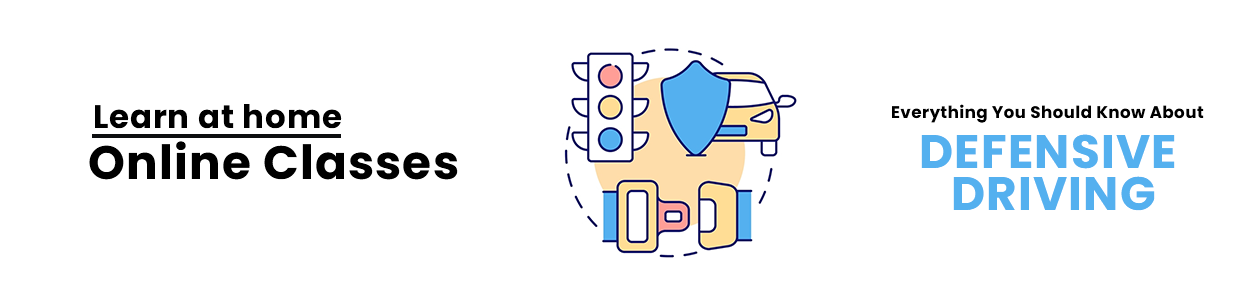
<style>
.page{position:relative;width:1250px;height:300px;background:#ffffff}
.page>*{position:absolute;margin:0}
.t1{font:32.5px "Poppins-Bold";letter-spacing:0.025em;color:#000000}
.t2{font:16.7px "Poppins-Bold";letter-spacing:0.025em;color:#000000}
.t3{font:46.9px "Poppins-Bold";letter-spacing:0.025em;color:#54b0ef}
.t4{font:46.9px "Poppins-Bold";letter-spacing:0.025em;color:#000000}
</style>
<div class="page">
<p class="t1" style="left:95px;top:104px;width:247px;height:25px">Learn at home</p>
<p class="t2" style="left:892px;top:104px;width:312px;height:19px">Everything You Should Know About</p>
<p class="t3" style="left:921px;top:134px;width:254px;height:35px">DEFENSIVE</p>
<p class="t4" style="left:89px;top:141px;width:369px;height:39px">Online Classes</p>
<p class="t3" style="left:953px;top:176px;width:202px;height:35px">DRIVING</p>
</div>
